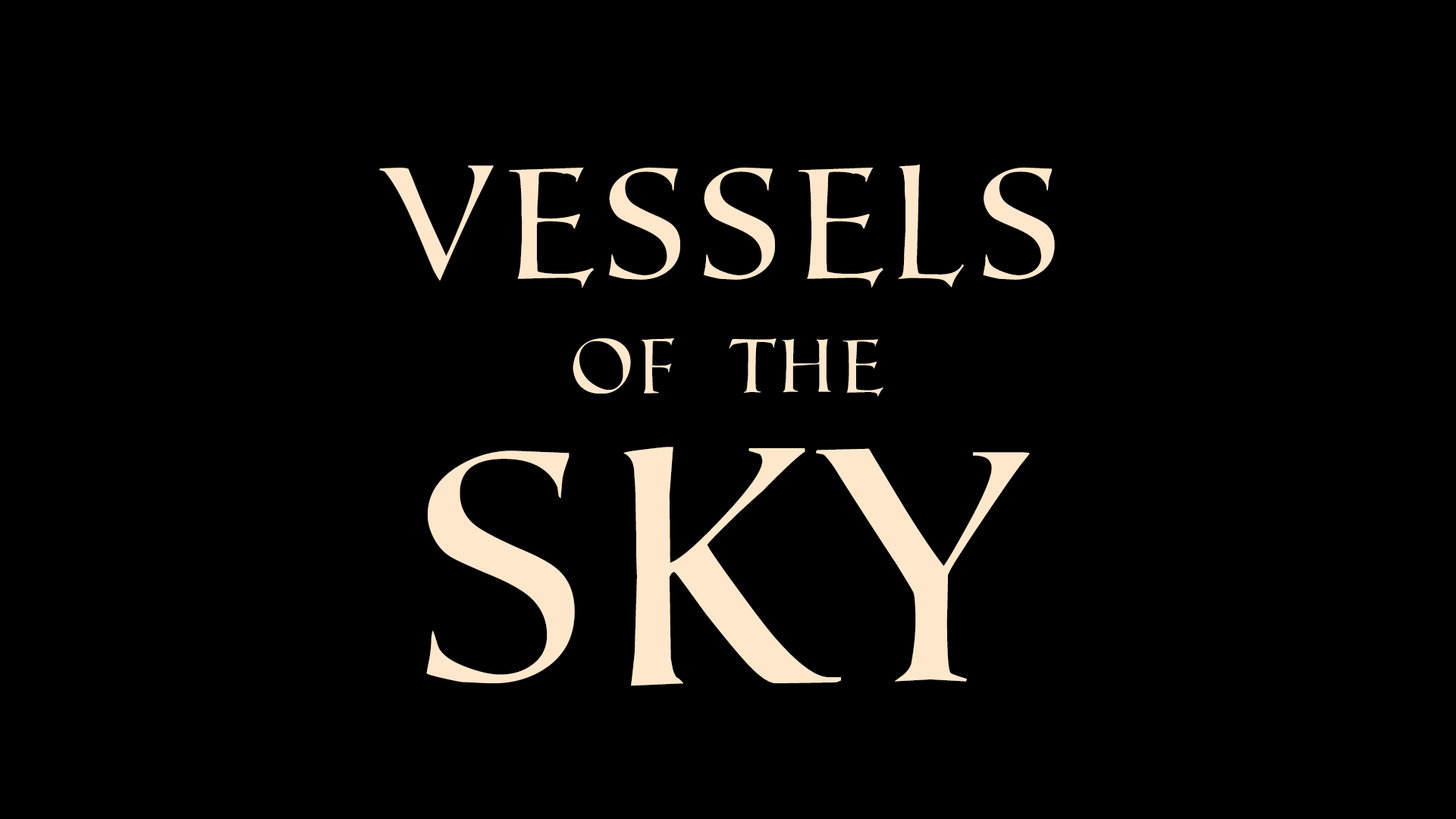
<style>
.page{position:relative;width:1456px;height:819px;background:#000000}
.page>*{position:absolute;margin:0}
.t1{font:158.5px "RomanSD";color:#ffe7cb}
.t2{font:75.8px "RomanSD";color:#ffe7cb}
.t3{font:329.6px "RomanSD";letter-spacing:-0.2em;color:#ffe7cb}
.t4{font:329.6px "RomanSD";color:#ffe7cb}
</style>
<div class="page">
<p class="t1" style="left:379px;top:165px;width:676px;height:123px">Vessels</p>
<p class="t2" style="left:573px;top:338px;width:310px;height:59px">OF THE</p>
<p class="t3" style="left:426px;top:447px;width:604px;height:239px"><span class="t4">S</span>ky</p>
</div>
